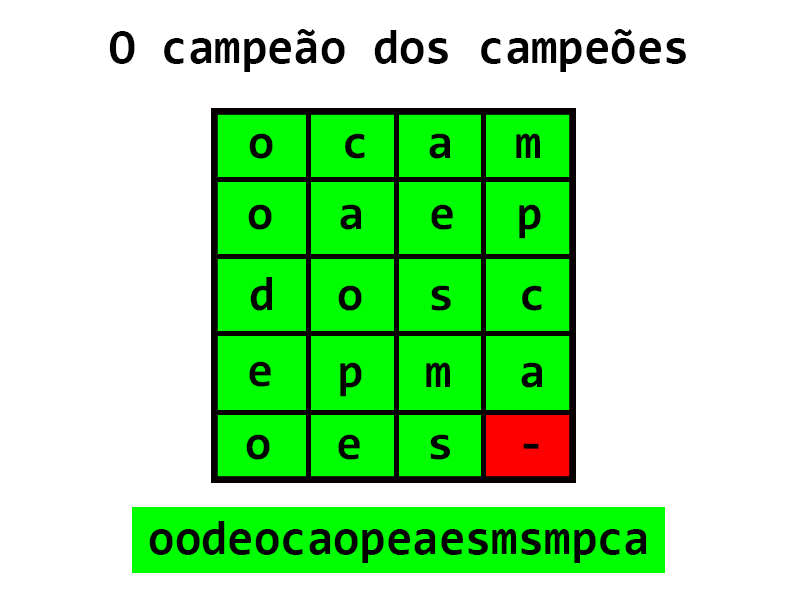
<style>
.page{position:relative;width:800px;height:600px;background:#ffffff}
.page>*{position:absolute;margin:0}
.t1{font:48px "Consolas-Bold";color:#000000}
.t2{font:48.1px "Consolas-Bold";color:#000000}
</style>
<div class="page">
<p class="t1" style="left:109px;top:29px;width:577px;height:43px">O campeão dos campeões</p>
<p class="t2" style="left:249px;top:133px;width:24px;height:26px">o</p>
<p class="t2" style="left:345px;top:133px;width:20px;height:26px">c</p>
<p class="t2" style="left:429px;top:133px;width:21px;height:26px">a</p>
<p class="t2" style="left:516px;top:133px;width:24px;height:25px">m</p>
<p class="t2" style="left:248px;top:204px;width:24px;height:26px">o</p>
<p class="t2" style="left:340px;top:204px;width:21px;height:26px">a</p>
<p class="t2" style="left:431px;top:204px;width:22px;height:26px">e</p>
<p class="t2" style="left:519px;top:204px;width:22px;height:35px">p</p>
<p class="t2" style="left:250px;top:277px;width:22px;height:34px">d</p>
<p class="t2" style="left:338px;top:285px;width:24px;height:26px">o</p>
<p class="t2" style="left:431px;top:285px;width:20px;height:26px">s</p>
<p class="t2" style="left:522px;top:285px;width:20px;height:26px">c</p>
<p class="t2" style="left:249px;top:361px;width:22px;height:26px">e</p>
<p class="t2" style="left:340px;top:362px;width:22px;height:35px">p</p>
<p class="t2" style="left:426px;top:362px;width:24px;height:25px">m</p>
<p class="t2" style="left:521px;top:362px;width:21px;height:26px">a</p>
<p class="t2" style="left:246px;top:434px;width:24px;height:26px">o</p>
<p class="t2" style="left:338px;top:434px;width:22px;height:26px">e</p>
<p class="t2" style="left:430px;top:434px;width:20px;height:26px">s</p>
<p class="t2" style="left:523px;top:443px;width:16px;height:6px">-</p>
<p class="t1" style="left:149px;top:521px;width:498px;height:42px">oodeocaopeaesmsmpca</p>
</div>
